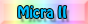
<style>
.page{position:relative;width:88px;height:24px}
.page>*{position:absolute;margin:0}
.t1{font:14px "HoboStd";color:#00c0ff}
</style>
<div class="page">
<p class="t1" style="left:18px;top:6px;width:49px;height:12px">Micra II</p>
</div>
